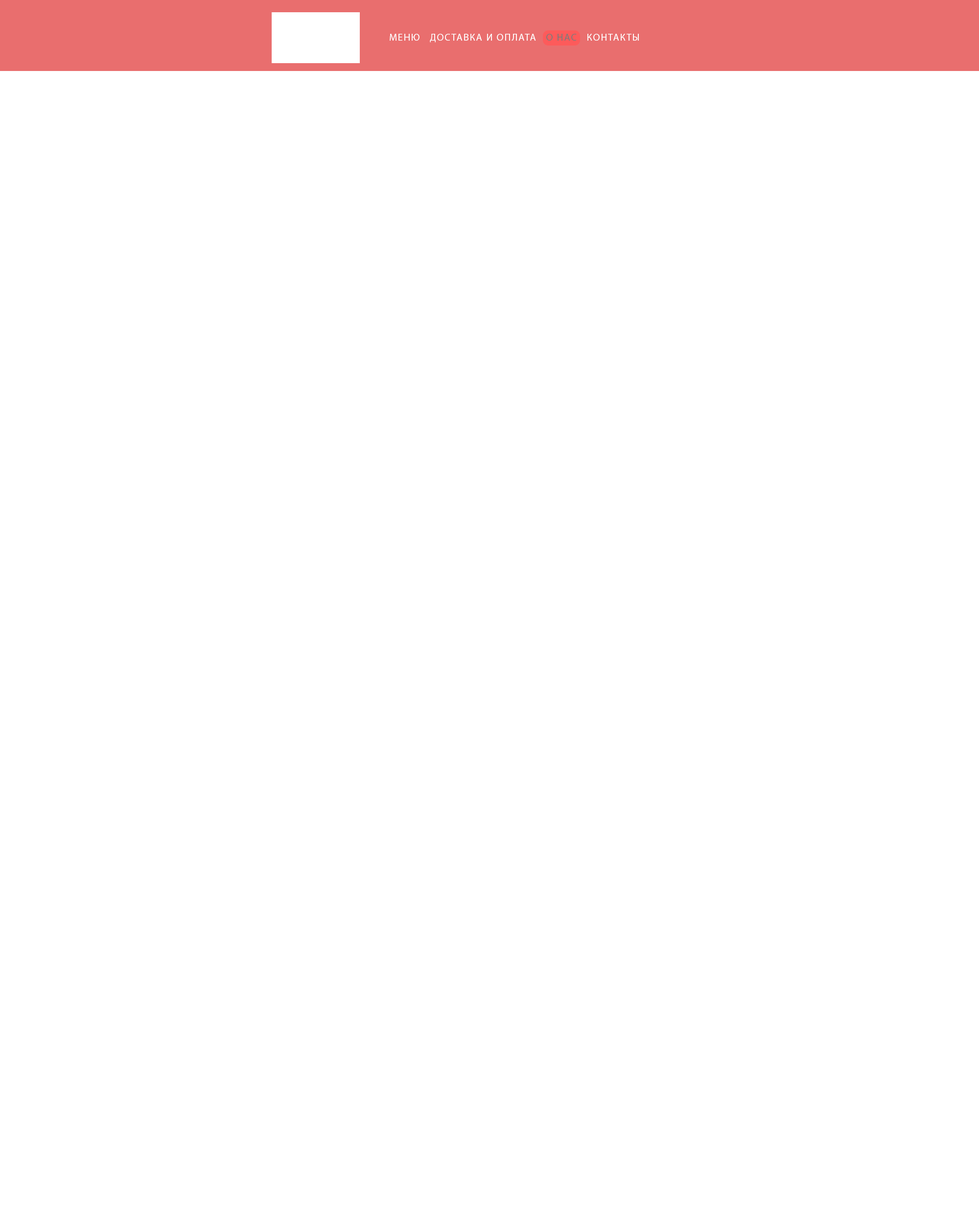
<style>
.page{position:relative;width:979px;height:1218px;background:#ffffff}
.page>*{position:absolute;margin:0}
.t1{font:9.9px "MyriadPro-Regular";letter-spacing:0.1em;color:#ffffff;text-transform:uppercase}
.t2{font:9.9px "MyriadPro-Regular";letter-spacing:0.1em;color:#7b7979;text-transform:uppercase}
</style>
<div class="page">
<p class="t1" style="left:390px;top:34px;width:249px;height:9px">Меню   доставка и оплата   <span class="t2">о нас</span>   контакты</p>
</div>
